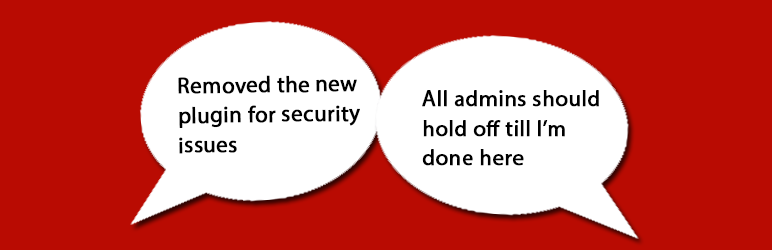
<style>
.page{position:relative;width:772px;height:250px;background:#b90b02}
.page>*{position:absolute;margin:0}
.t1{font:22.7px/29.6px "MyriadPro-Regular";color:#000000;font-weight:bold}
</style>
<div class="page">
<p class="t1" style="left:178px;top:75px;width:182px;height:79px;rotate:-1deg">Removed the new<br>plugin for security <br>issues</p>
<p class="t1" style="left:422px;top:90px;width:177px;height:76px">All admins should <br>hold off till I’m <br>done here</p>
</div>
